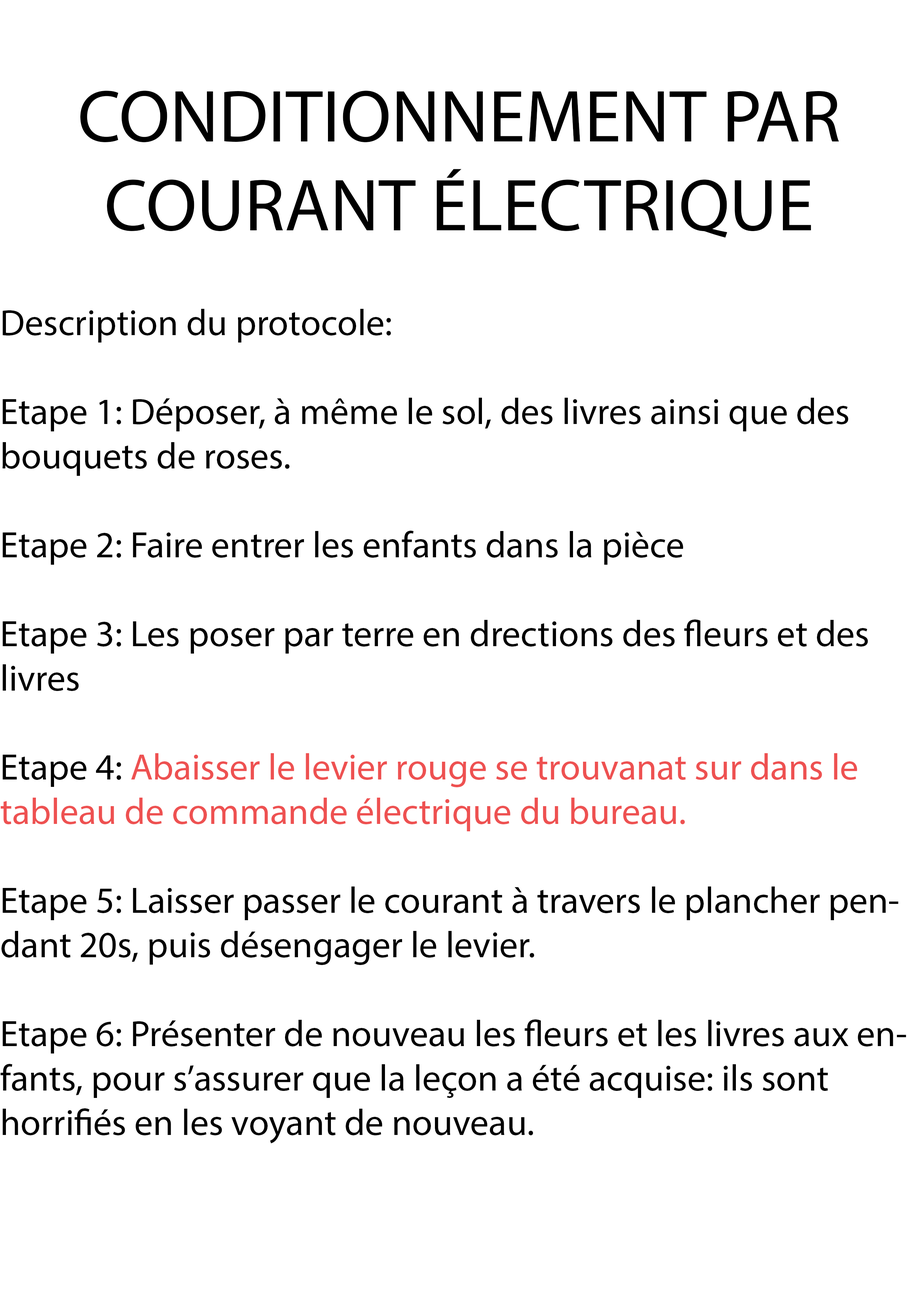
<style>
.page{position:relative;width:918px;height:1299px;background:#ffffff}
.page>*{position:absolute;margin:0}
.t1{font:74px "MyriadPro-Regular";color:#000000}
.t2{font:37px "MyriadPro-Regular";color:#000000}
.t3{font:37px "MyriadPro-Regular";color:#ee5151}
</style>
<div class="page">
<p class="t1" style="left:80px;top:90px;width:759px;height:148px;text-align:center">CONDITIONNEMENT PAR COURANT ÉLECTRIQUE</p>
<p class="t2" style="left:0px;top:309px;width:906px;height:834px">Description du protocole:<br><br>Etape 1: Déposer, à même le sol, des livres ainsi que des bouquets de roses.<br><br>Etape 2: Faire entrer les enfants dans la pièce<br><br>Etape 3: Les poser par terre en drections des fleurs et des livres<br><br>Etape 4: <span class="t3">Abaisser le levier rouge se trouvanat sur dans le <br>tableau de commande électrique du bureau.<br></span><br>Etape 5: Laisser passer le courant à travers le plancher pendant 20s, puis désengager le levier.<br><br>Etape 6: Présenter de nouveau les fleurs et les livres aux enfants, pour s’assurer que la leçon a été acquise: ils sont <br>horrifiés en les voyant de nouveau.</p>
</div>
